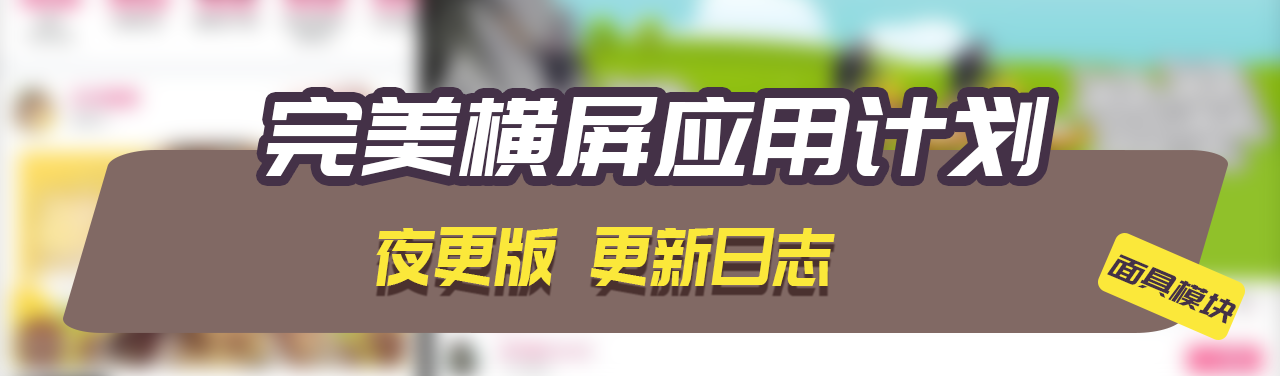
<style>
.page{position:relative;width:1280px;height:376px;background:#816964}
.page>*{position:absolute;margin:0}
.t1{font:108.8px "PangMenZhengDao";letter-spacing:0.05em;color:#ffffff;font-style:italic;scale:0.92 1}
.t2{font:81.3px "PangMenZhengDao";letter-spacing:0.05em;color:#fbe83a;font-style:italic;scale:0.77 1}
.t3{font:33.1px "PangMenZhengDao";letter-spacing:0.05em;color:#443147;font-style:italic}
</style>
<div class="page">
<p class="t1" style="left:265px;top:97px;width:785px;height:79px">完美横屏应用计划</p>
<p class="t2" style="left:376px;top:227px;width:459px;height:59px">夜更版 更新日志</p>
<p class="t3" style="left:1107px;top:254px;width:129px;height:70px;rotate:23deg">面具模块</p>
</div>
